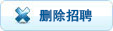
<style>
.page{position:relative;width:113px;height:31px}
.page>*{position:absolute;margin:0}
.t1{font:13px "SimHei";color:#005998;font-weight:bold}
</style>
<div class="page">
<p class="t1" style="left:39px;top:9px;width:54px;height:13px">删除招聘</p>
</div>
